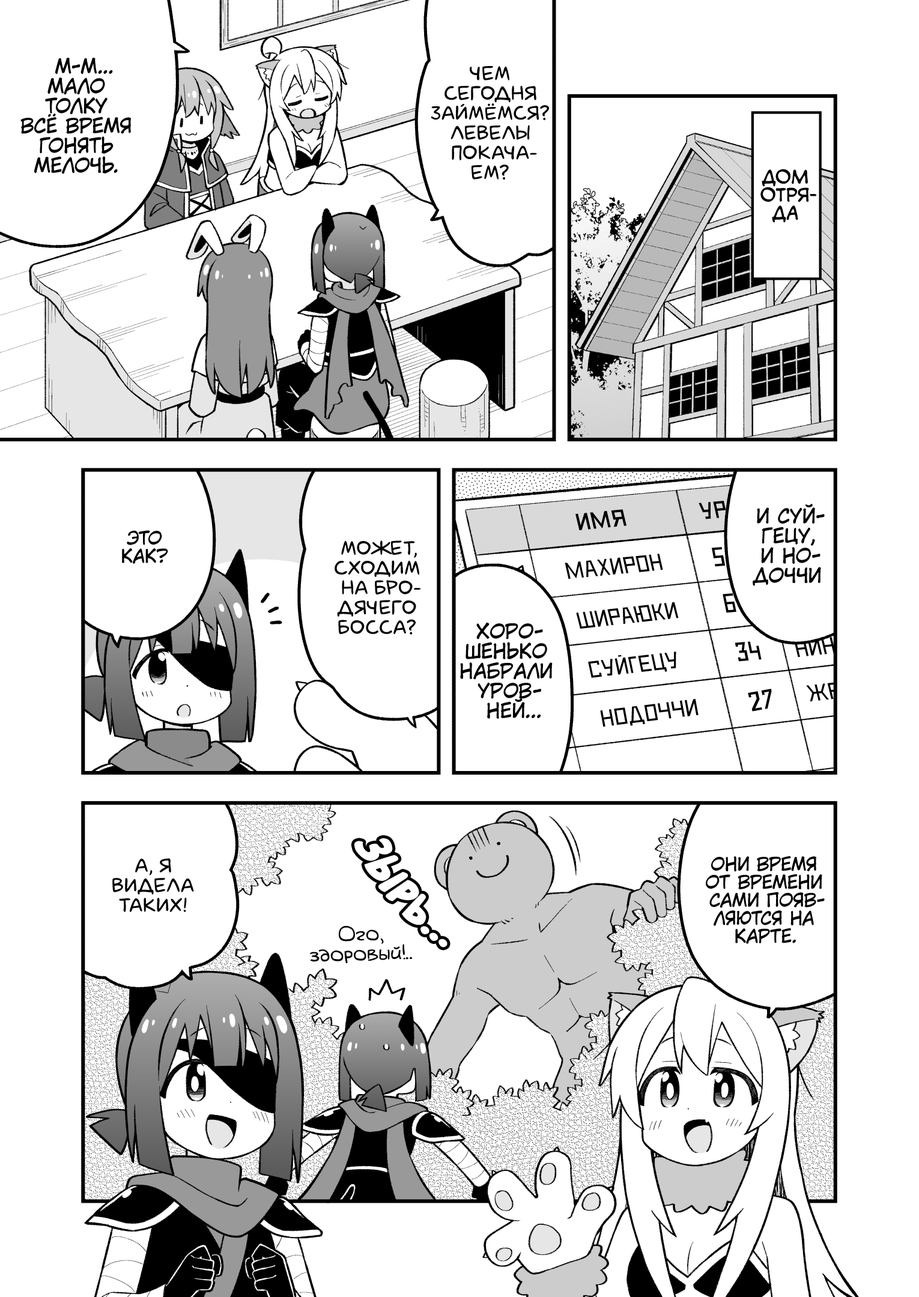
<style>
.page{position:relative;width:919px;height:1297px;background:#ffffff}
.page>*{position:absolute;margin:0}
.t1{font:19.8px "KuraiVoice2";color:#000000;text-transform:uppercase}
.t2{font:19.8px "laCartoonerie";color:#000000;text-transform:uppercase}
.t3{font:18px "v_CCMonologous";color:#000000;text-transform:uppercase}
.t4{font:23.4px "DeadMetroC";color:#000000;text-transform:uppercase;font-weight:bold;scale:1.06 1}
.t5{font:23.4px "DeadMetroC";color:#000000;text-transform:uppercase;font-weight:bold}
.t6{font:18px "KuraiVoice2";color:#000000;text-transform:uppercase}
.t7{font:23.4px "DeadMetroC";color:#000000;text-transform:uppercase}
.t8{font:27px "DeadMetroC";color:#000000;text-transform:uppercase}
.t9{font:23.4px "DeadMetroC";color:#000000;text-transform:uppercase;scale:1.03 1}
.t10{font:19.8px "v_Augie";color:#000000}
</style>
<div class="page">
<p class="t1" style="left:20px;top:58px;width:111px;height:116px;text-align:center">М-м...<br>Мало<br>толку<br>Всё время<br>гонять<br>мелочь.</p>
<p class="t2" style="left:431px;top:66px;width:118px;height:114px;text-align:center">Чем<br>сегодня<br>займёмся?<br>Левелы<br>покача-<br>ем?</p>
<p class="t3" style="left:760px;top:169px;width:57px;height:54px;text-align:center">Дом<br>отря-<br>да</p>
<p class="t4" style="left:575px;top:509px;width:52px;height:21px;rotate:-6deg">имя</p>
<p class="t5" style="left:699px;top:501px;width:27px;height:19px;rotate:-5deg">ур</p>
<p class="t1" style="left:753px;top:504px;width:72px;height:82px;text-align:center">И Суй-<br>гецу,<br>и Но-<br>доччи</p>
<p class="t6" style="left:122px;top:530px;width:46px;height:34px;text-align:center">Это<br>как?</p>
<p class="t2" style="left:335px;top:541px;width:86px;height:94px;text-align:center">Может,<br>сходим<br>на бро-<br>дячего<br>босса?</p>
<p class="t7" style="left:565px;top:554px;width:98px;height:25px;rotate:-5deg">Махирон</p>
<p class="t8" style="left:712px;top:547px;width:14px;height:20px;rotate:-5deg">5</p>
<p class="t8" style="left:723px;top:593px;width:13px;height:20px;rotate:-5deg">6</p>
<p class="t7" style="left:576px;top:602px;width:103px;height:27px;rotate:-6deg">Шираюки</p>
<p class="t1" style="left:460px;top:622px;width:93px;height:97px;text-align:center">Хоро-<br>шенько<br>набрали<br>уров-<br>ней...</p>
<p class="t8" style="left:735px;top:642px;width:27px;height:20px;rotate:-5deg">34</p>
<p class="t7" style="left:794px;top:637px;width:42px;height:21px;rotate:-6deg">нин</p>
<p class="t7" style="left:588px;top:652px;width:88px;height:26px;rotate:-7deg">Суйгецу</p>
<p class="t8" style="left:748px;top:689px;width:24px;height:23px;rotate:-10deg">27</p>
<p class="t7" style="left:806px;top:682px;width:34px;height:20px;rotate:-6deg">жр</p>
<p class="t9" style="left:600px;top:699px;width:99px;height:28px;rotate:-7deg">Нодоччи</p>
<p class="t6" style="left:706px;top:856px;width:119px;height:88px;text-align:center">Они время<br>от времени<br>сами появ-<br>ляются на<br>карте.</p>
<p class="t2" style="left:112px;top:858px;width:82px;height:54px;text-align:center">А, я<br>видела<br>таких!</p>
<p class="t10" style="left:310px;top:926px;width:102px;height:37px;text-align:center;rotate:-2deg">Ого,<br>здоровый!..</p>
</div>
